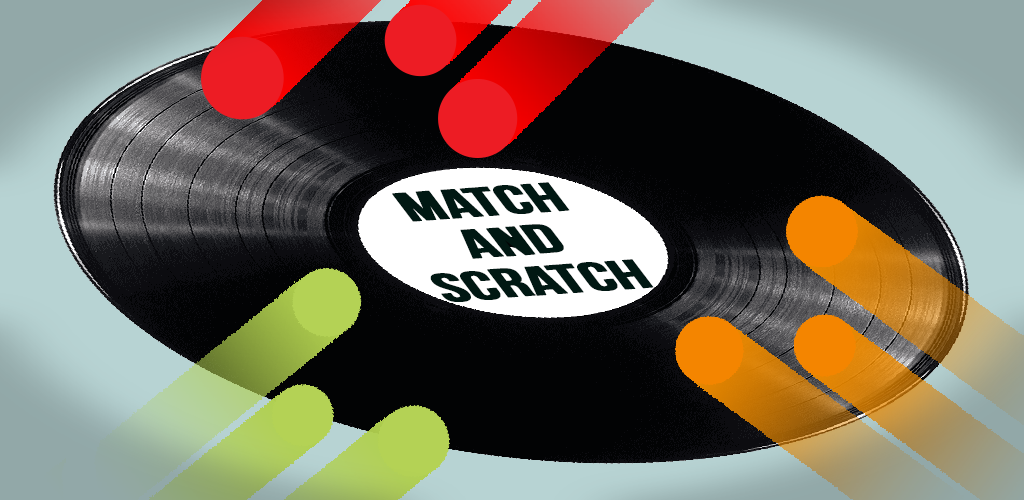
<style>
.page{position:relative;width:1024px;height:500px;background:#020304}
.page>*{position:absolute;margin:0}
.t1{font:49.2px/49.4px "BebasNeue";letter-spacing:-0.02em;color:#011813;font-weight:bold;scale:1.55 1}
</style>
<div class="page">
<p class="t1" style="left:392px;top:182px;width:262px;height:120px;text-align:center;rotate:-4deg">MATCH<br>and<br>SCRATCH</p>
</div>
